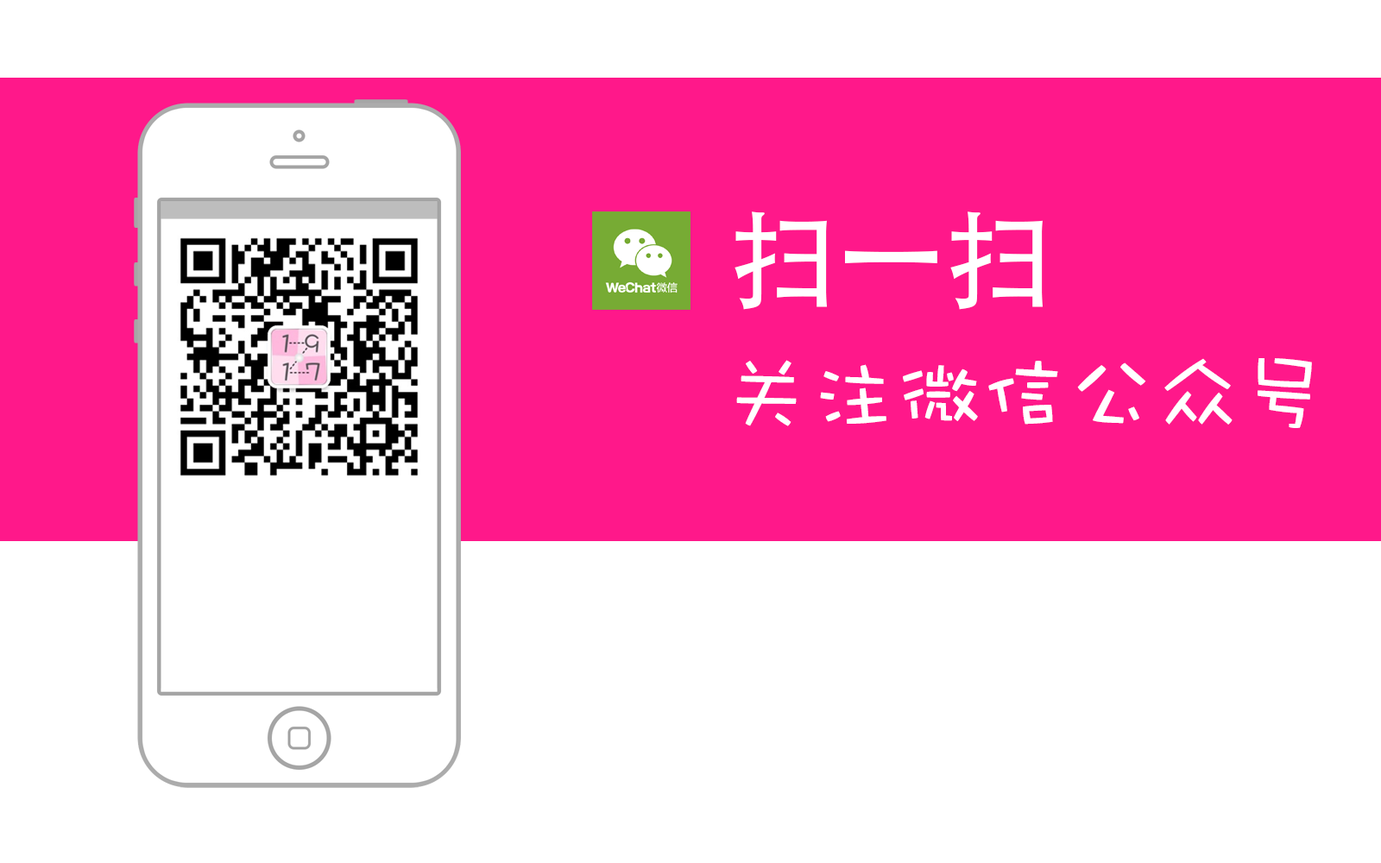
<style>
.page{position:relative;width:1381px;height:863px;background:#ffffff}
.page>*{position:absolute;margin:0}
.t1{font:107.9px "AdobeHeitiStd-Regular";color:#ffffff}
.t2{font:86.3px "DFWaWaSC-W5";color:#ffffff}
</style>
<div class="page">
<p class="t1" style="left:735px;top:212px;width:308px;height:98px">扫一扫</p>
<p class="t2" style="left:736px;top:358px;width:576px;height:70px">关注微信公众号</p>
</div>
